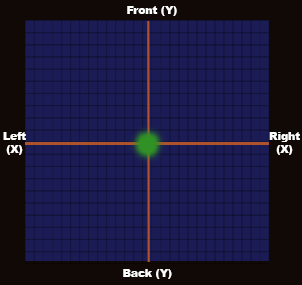
<style>
.page{position:relative;width:302px;height:285px;background:#1b1c55}
.page>*{position:absolute;margin:0}
.t1{font:10.7px "Arial-Black";color:#ffffff}
</style>
<div class="page">
<p class="t1" style="left:127px;top:6px;width:50px;height:10px">Front (Y)</p>
<p class="t1" style="left:3px;top:132px;width:23px;height:23px;text-align:center">Left<br>(X)</p>
<p class="t1" style="left:269px;top:132px;width:31px;height:23px;text-align:center">Right<br>(X)</p>
<p class="t1" style="left:123px;top:269px;width:49px;height:10px">Back (Y)</p>
</div>
